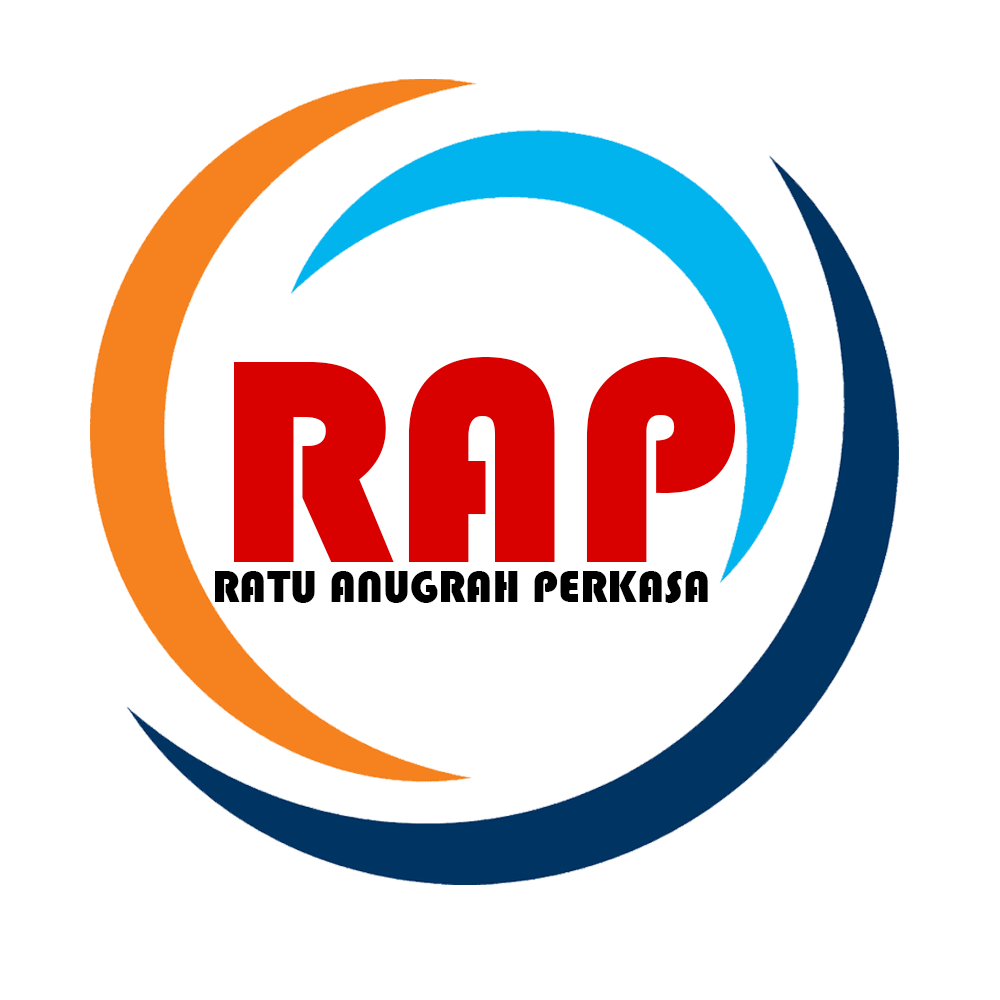
<style>
.page{position:relative;width:1000px;height:1000px;background:#ffffff}
.page>*{position:absolute;margin:0}
.t1{font:300px "Bauhaus93";color:#d90000}
.t2{font:45.8px "Bauhaus93";color:#000000}
</style>
<div class="page">
<p class="t1" style="left:234px;top:357px;width:502px;height:205px">RAP</p>
<p class="t2" style="left:215px;top:571px;width:493px;height:32px">RATU ANUGRAH PERKASA</p>
</div>
